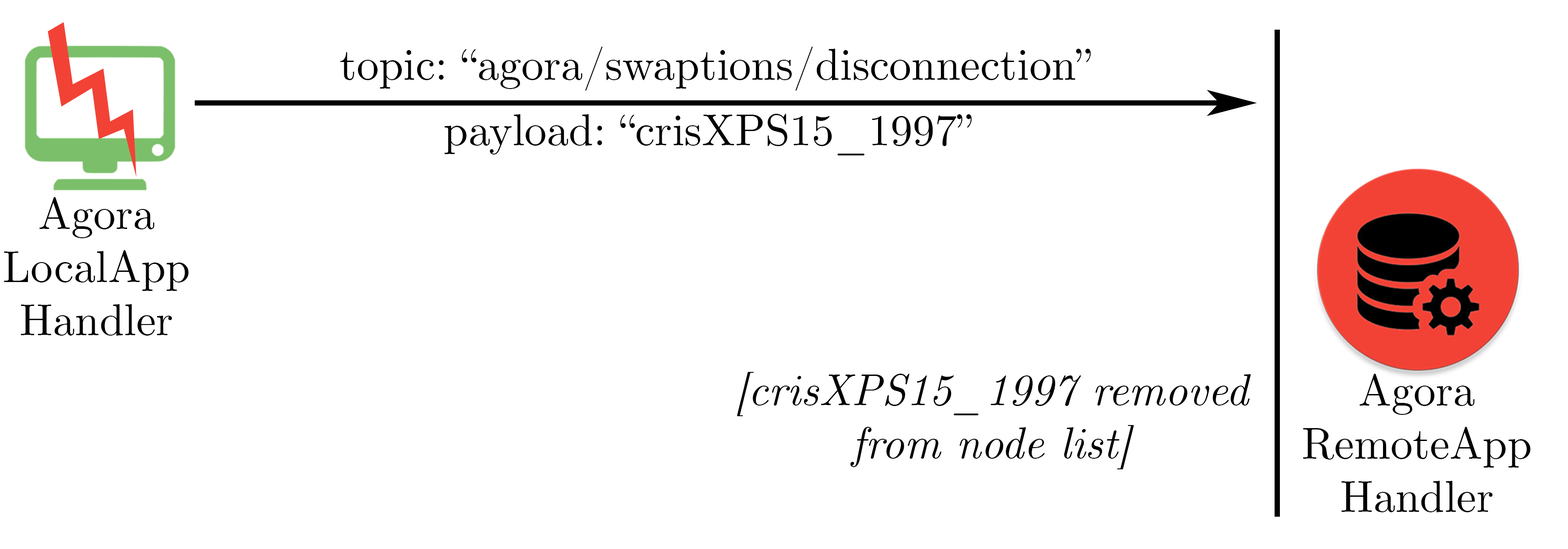
<style>
.page{position:relative;width:1568px;height:549px;background:#ffffff}
.page>*{position:absolute;margin:0}
.t1{font:44.3px "CMUSerif-Roman";color:#000000}
.t2{font:44.3px "CMUSerif-Italic";color:#000000}
</style>
<div class="page">
<p class="t1" style="left:340px;top:46px;width:751px;height:45px">topic: “agora/swaptions/disconnection”</p>
<p class="t1" style="left:444px;top:114px;width:528px;height:41px">payload: “crisXPS15_1997”</p>
<p class="t1" style="left:4px;top:197px;width:185px;height:138px;text-align:center">Agora<br>LocalApp<br>Handler</p>
<p class="t2" style="left:737px;top:372px;width:514px;height:97px;text-align:center">[crisXPS15_1997 removed<br>from node list]</p>
<p class="t1" style="left:1303px;top:374px;width:227px;height:138px;text-align:center">Agora<br>RemoteApp<br>Handler</p>
</div>
